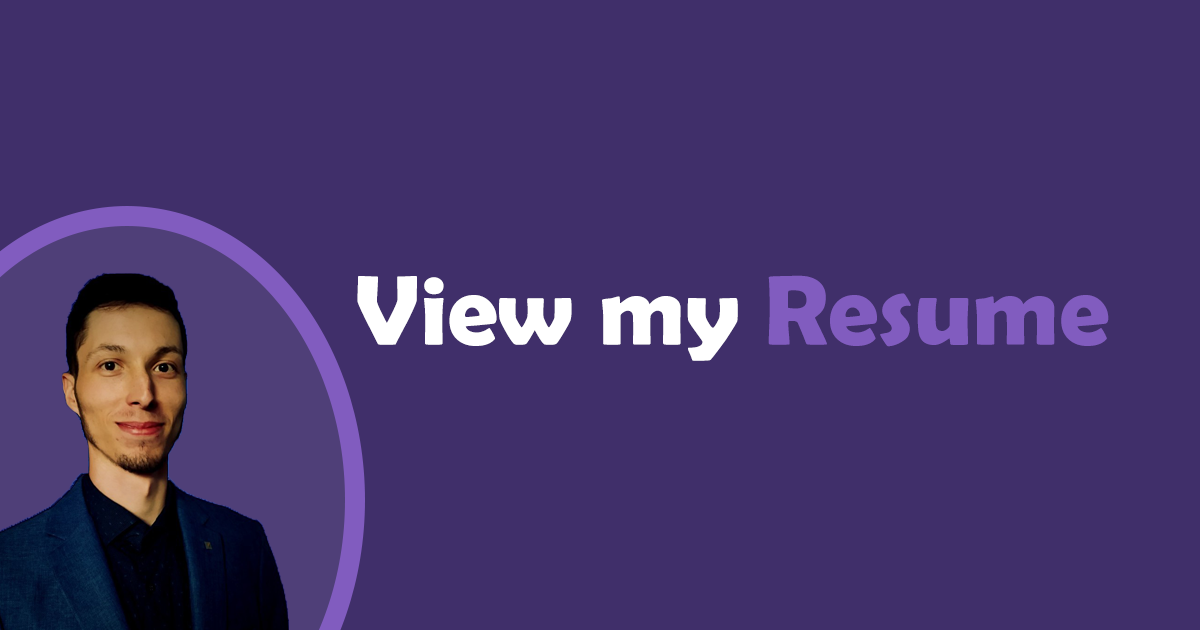
<style>
.page{position:relative;width:1200px;height:630px;background:#402f6a}
.page>*{position:absolute;margin:0}
.t1{font:100px "BerlinSansFBDemi-Bold";color:#ffffff}
.t2{font:100px "BerlinSansFBDemi-Bold";color:#815cbf}
</style>
<div class="page">
<p class="t1" style="left:357px;top:275px;width:752px;height:86px">View my <span class="t2">Resume</span></p>
</div>
